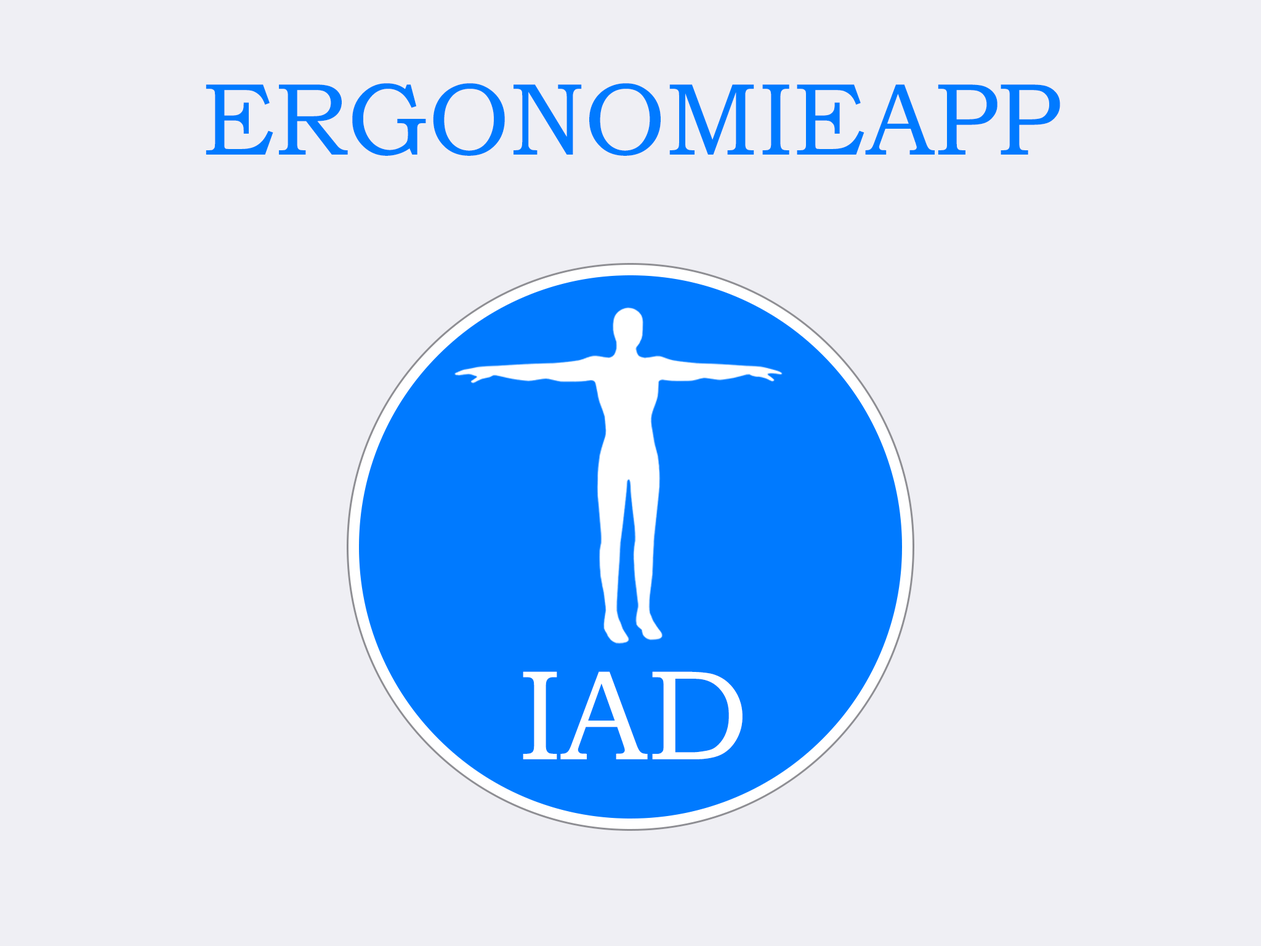
<style>
.page{position:relative;width:1261px;height:946px;background:#efeff4}
.page>*{position:absolute;margin:0}
.t1{font:102.6px "BookmanOldStyle";letter-spacing:-0.01em;color:#007aff}
</style>
<div class="page">
<p class="t1" style="left:206px;top:83px;width:854px;height:73px">ERGONOMIEAPP</p>
</div>
